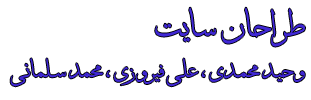
<style>
.page{position:relative;width:311px;height:100px;background:#ffffff}
.page>*{position:absolute;margin:0}
.t1{font:36px "AThuluth";letter-spacing:0.01em;color:#4028d5}
.t2{font:24px "AThuluth";letter-spacing:0.01em;color:#4028d5}
</style>
<div class="page">
<p class="t1" style="left:155px;top:7px;width:150px;height:40px">طراحان سایت</p>
<p class="t2" style="left:10px;top:58px;width:295px;height:29px">وحید محمدی ، علی فیروزی ، محمد سلمانی</p>
</div>
